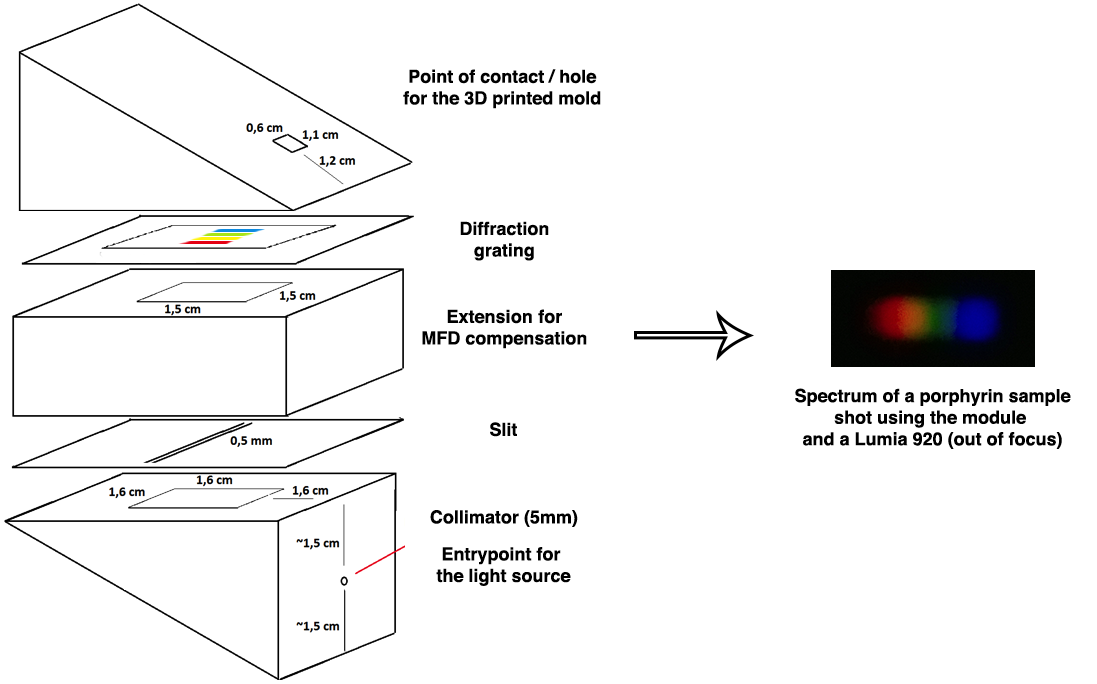
<style>
.page{position:relative;width:1097px;height:684px;background:#ffffff}
.page>*{position:absolute;margin:0}
.t1{font:18px "Helvetica-Bold";color:#000000}
</style>
<div class="page">
<p class="t1" style="left:403px;top:69px;width:198px;height:40px;text-align:center">Point of contact / hole<br>for the 3D printed mold</p>
<p class="t1" style="left:460px;top:221px;width:89px;height:40px;text-align:center">Diffraction<br>grating</p>
<p class="t1" style="left:422px;top:309px;width:165px;height:40px;text-align:center">Extension for<br>MFD compensation</p>
<p class="t1" style="left:795px;top:388px;width:276px;height:61px;text-align:center">Spectrum of a porphyrin sample<br>shot using the module <br>and a Lumia 920 (out of focus)</p>
<p class="t1" style="left:490px;top:422px;width:27px;height:15px">Slit</p>
<p class="t1" style="left:430px;top:510px;width:148px;height:17px">Collimator (5mm)</p>
<p class="t1" style="left:436px;top:547px;width:135px;height:39px;text-align:center">Entrypoint for <br>the light source</p>
</div>
